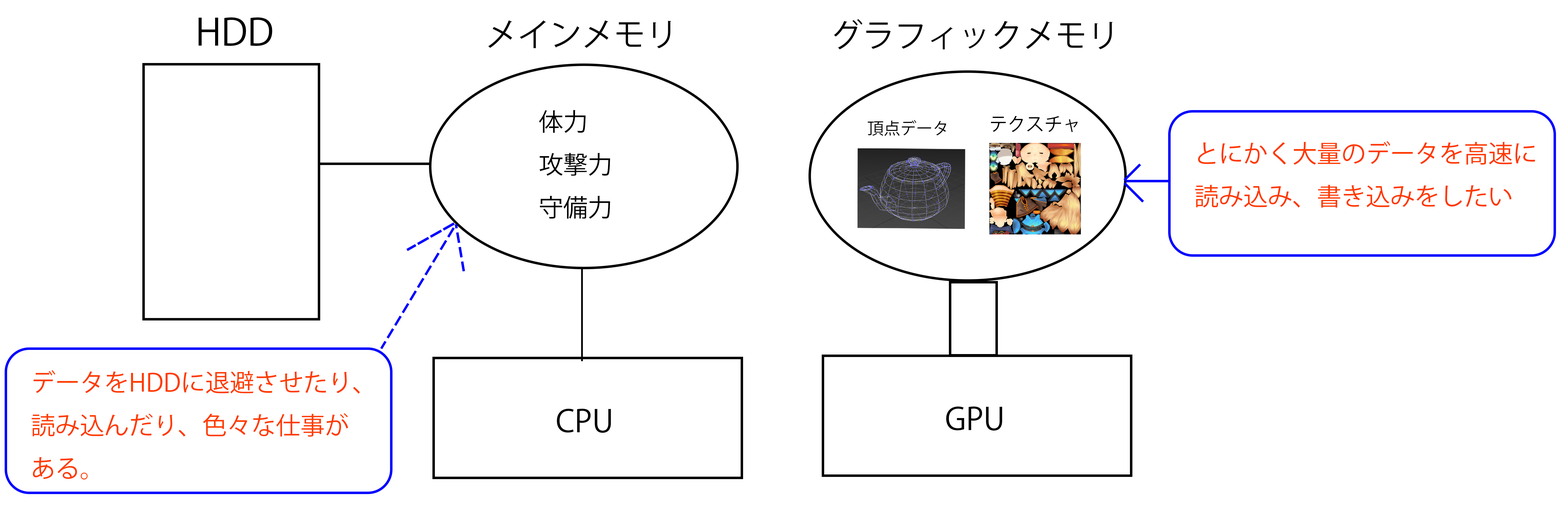
<style>
.page{position:relative;width:1568px;height:523px;background:#ffffff}
.page>*{position:absolute;margin:0}
.t1{font:36.8px "KozGoPr6N-Regular";color:#000000}
.t2{font:32.1px "KozGoPr6N-Regular";color:#000000}
.t3{font:24.5px "KozGoPr6N-Regular";color:#000000}
.t4{font:16.3px "KozGoPr6N-Regular";color:#000000}
.t5{font:18.4px "KozGoPr6N-Regular";color:#000000}
.t6{font:24.5px "KozGoPr6N-Regular";color:#ff3800}
.t7{font:24.5px "KozGoPr6N-Regular";color:#ff3b00}
.t8{font:30.6px "KozGoPr6N-Regular";color:#000000}
</style>
<div class="page">
<p class="t1" style="left:198px;top:17px;width:74px;height:29px">HDD</p>
<p class="t2" style="left:488px;top:20px;width:183px;height:28px">メインメモリ</p>
<p class="t2" style="left:834px;top:19px;width:279px;height:30px">グラフィックメモリ</p>
<p class="t3" style="left:539px;top:110px;width:71px;height:109px">体力<br>攻撃力<br>守備力</p>
<p class="t4" style="left:868px;top:120px;width:78px;height:16px">頂点データ</p>
<p class="t5" style="left:991px;top:116px;width:87px;height:16px">ﾃクスチャ</p>
<p class="t6" style="left:1195px;top:141px;width:340px;height:67px">とにかく大量のデータを高速に<br>読み込み、書き込みをしたい</p>
<p class="t7" style="left:32px;top:370px;width:328px;height:109px">データをHDDに退避させたり、<br>読み込んだり、色々な仕事が<br>ある。</p>
<p class="t8" style="left:557px;top:408px;width:54px;height:25px">CPU</p>
<p class="t8" style="left:946px;top:406px;width:56px;height:24px">GPU</p>
</div>
